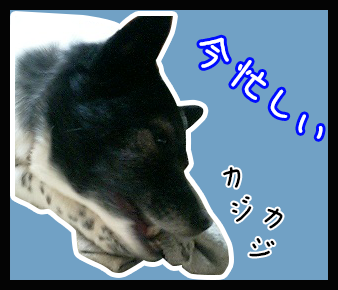
<style>
.page{position:relative;width:338px;height:290px;background:#71a1c5}
.page>*{position:absolute;margin:0}
.t1{font:45px "APJapanesefont";color:#ffffff}
.t2{font:35.6px "APJapanesefont";color:#000000}
</style>
<div class="page">
<p class="t1" style="left:199px;top:37px;width:124px;height:102px;rotate:37deg">今忙しい</p>
<p class="t2" style="left:223px;top:167px;width:29px;height:55px;rotate:-12deg">カジ</p>
<p class="t2" style="left:249px;top:208px;width:34px;height:49px;rotate:25deg">カジ</p>
</div>
